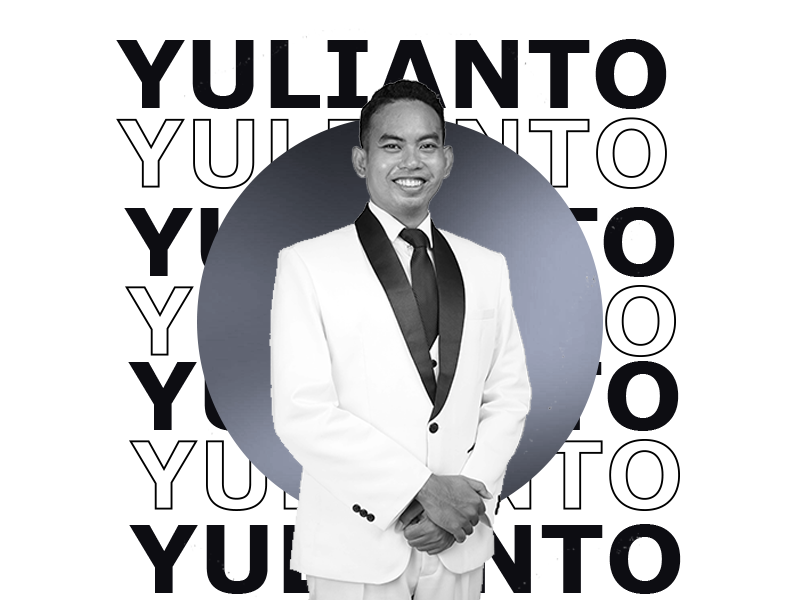
<style>
.page{position:relative;width:800px;height:600px;background:#ffffff}
.page>*{position:absolute;margin:0}
.t1{font:94.4px "Verdana-Bold";color:#0e0d0f}
.t2{font:94.4px "Verdana-Bold"}
</style>
<div class="page">
<p class="t1" style="left:116px;top:39px;width:551px;height:70px">YULIANTO</p>
<p class="t2" style="left:124px;top:207px;width:551px;height:70px">YULIANTO</p>
<p class="t2" style="left:128px;top:361px;width:551px;height:70px">YULIANTO</p>
<p class="t1" style="left:129px;top:524px;width:552px;height:70px">YULIANTO</p>
</div>
